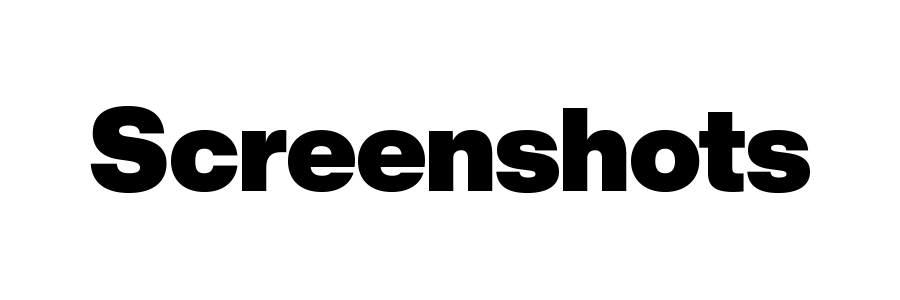
<style>
.page{position:relative;width:900px;height:300px;background:#ffffff}
.page>*{position:absolute;margin:0}
.t1{font:116.7px "HelveticaNowDisplay-XBlk";letter-spacing:-0.01em;color:#000000}
</style>
<div class="page">
<p class="t1" style="left:90px;top:106px;width:720px;height:88px">Screenshots</p>
</div>
